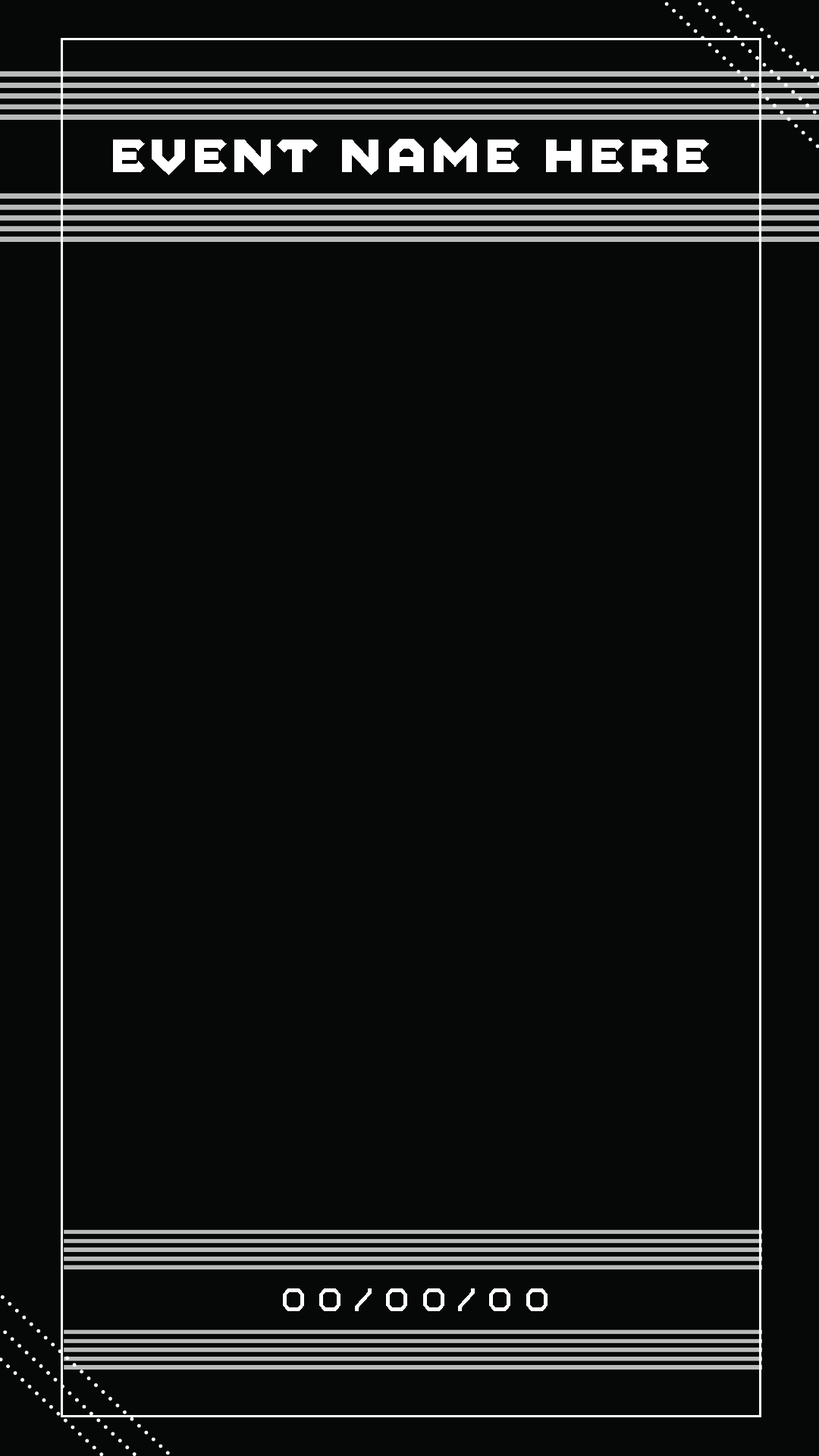
<style>
.page{position:relative;width:819px;height:1456px;background:#060808}
.page>*{position:absolute;margin:0}
.t1{font:50.8px "Mashine-Bold";color:#ffffff}
.t2{font:34px "Mashine-Regular";letter-spacing:0.23em;color:#ffffff}
</style>
<div class="page">
<p class="t1" style="left:113px;top:137px;width:596px;height:38px">EVENT NAME HERE</p>
<p class="t2" style="left:283px;top:1288px;width:265px;height:23px">00/00/00</p>
</div>
